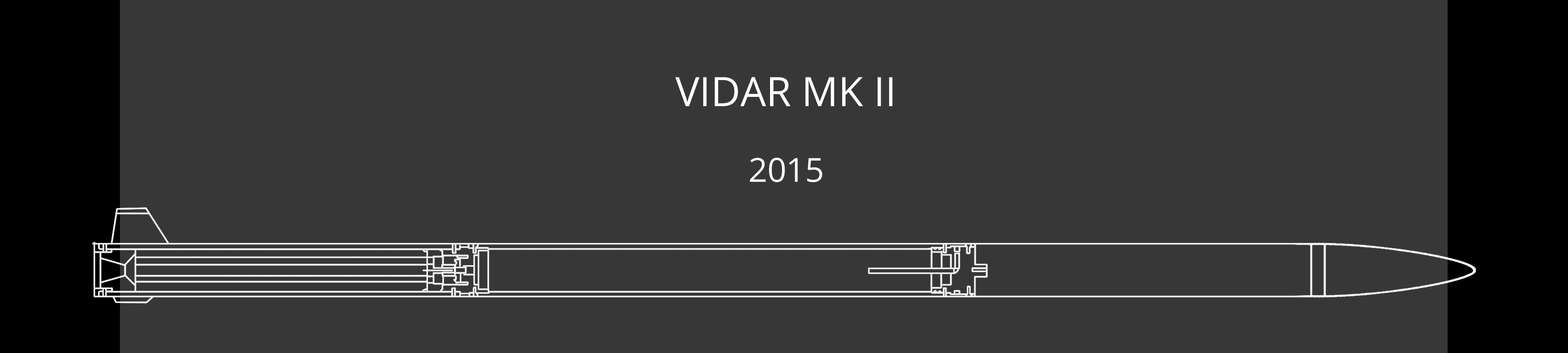
<style>
.page{position:relative;width:1568px;height:353px;background:#373737}
.page>*{position:absolute;margin:0}
.t1{font:40.6px "OpenSans";color:#ffffff}
.t2{font:33.2px "OpenSans";color:#ffffff}
</style>
<div class="page">
<p class="t1" style="left:675px;top:77px;width:218px;height:29px">VIDAR MK II</p>
<p class="t2" style="left:750px;top:158px;width:72px;height:24px">2015</p>
</div>
